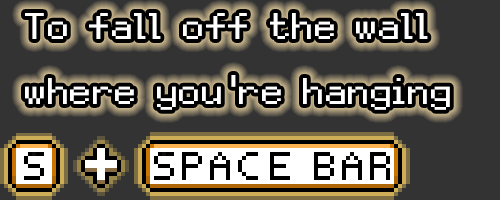
<style>
.page{position:relative;width:500px;height:200px;background:#333333}
.page>*{position:absolute;margin:0}
.t1{font:52px "Silver";color:#ffffff;scale:1.3 1}
</style>
<div class="page">
<p class="t1" style="left:25px;top:13px;width:403px;height:26px">To fall off the wall</p>
<p class="t1" style="left:25px;top:75px;width:425px;height:35px">where you're hanging</p>
</div>
